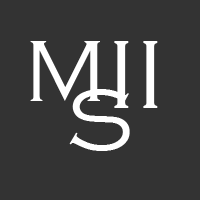
<style>
.page{position:relative;width:200px;height:200px;background:#333333}
.page>*{position:absolute;margin:0}
.t1{font:90px "CopperplateGothic-Light";color:#ffffff}
.t2{font:100px "CopperplateGothic-Light";color:#ffffff}
</style>
<div class="page">
<p class="t1" style="left:30px;top:41px;width:70px;height:60px">M</p>
<p class="t2" style="left:114px;top:41px;width:44px;height:67px">II</p>
<p class="t1" style="left:69px;top:89px;width:61px;height:62px">S</p>
</div>
